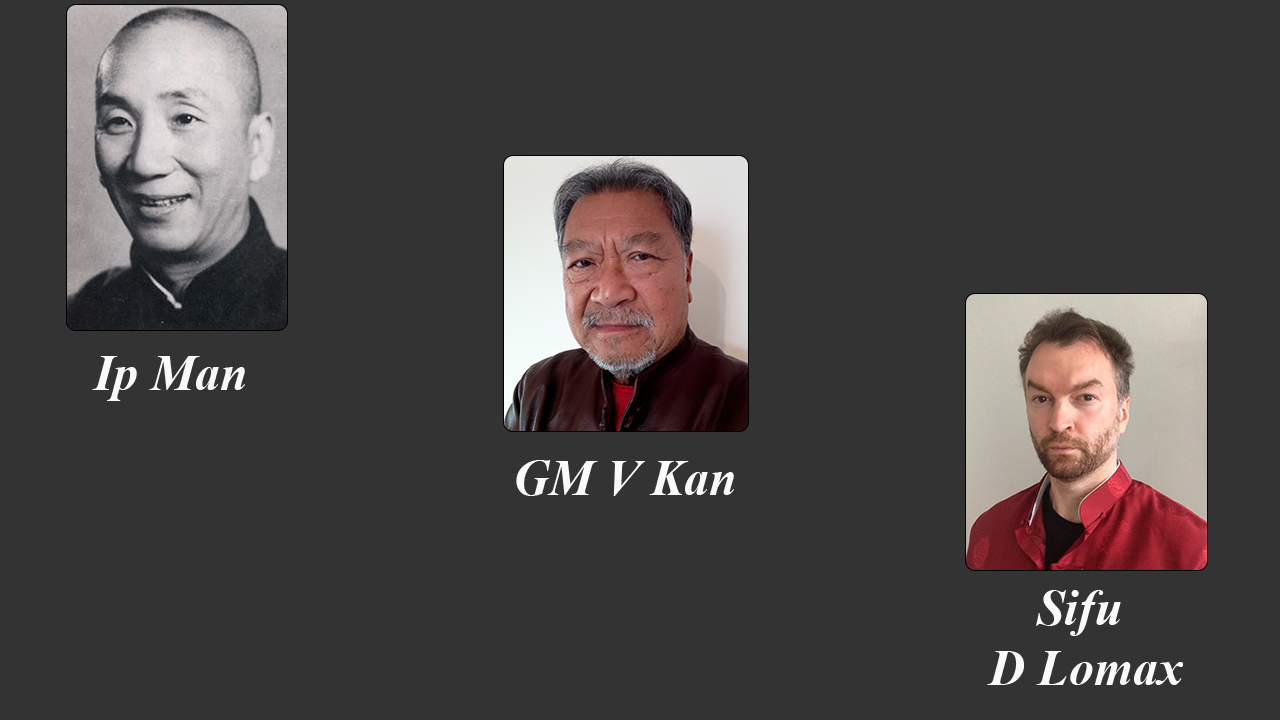
<style>
.page{position:relative;width:1280px;height:720px;background:#333333}
.page>*{position:absolute;margin:0}
.t1{font:50px "TimesNewRomanPS-BoldItalicMT";color:#fafafa}
</style>
<div class="page">
<p class="t1" style="left:92px;top:356px;width:153px;height:45px">Ip Man</p>
<p class="t1" style="left:516px;top:460px;width:218px;height:36px">GM V Kan</p>
<p class="t1" style="left:987px;top:590px;width:196px;height:95px;text-align:center">Sifu <br>D Lomax</p>
</div>
